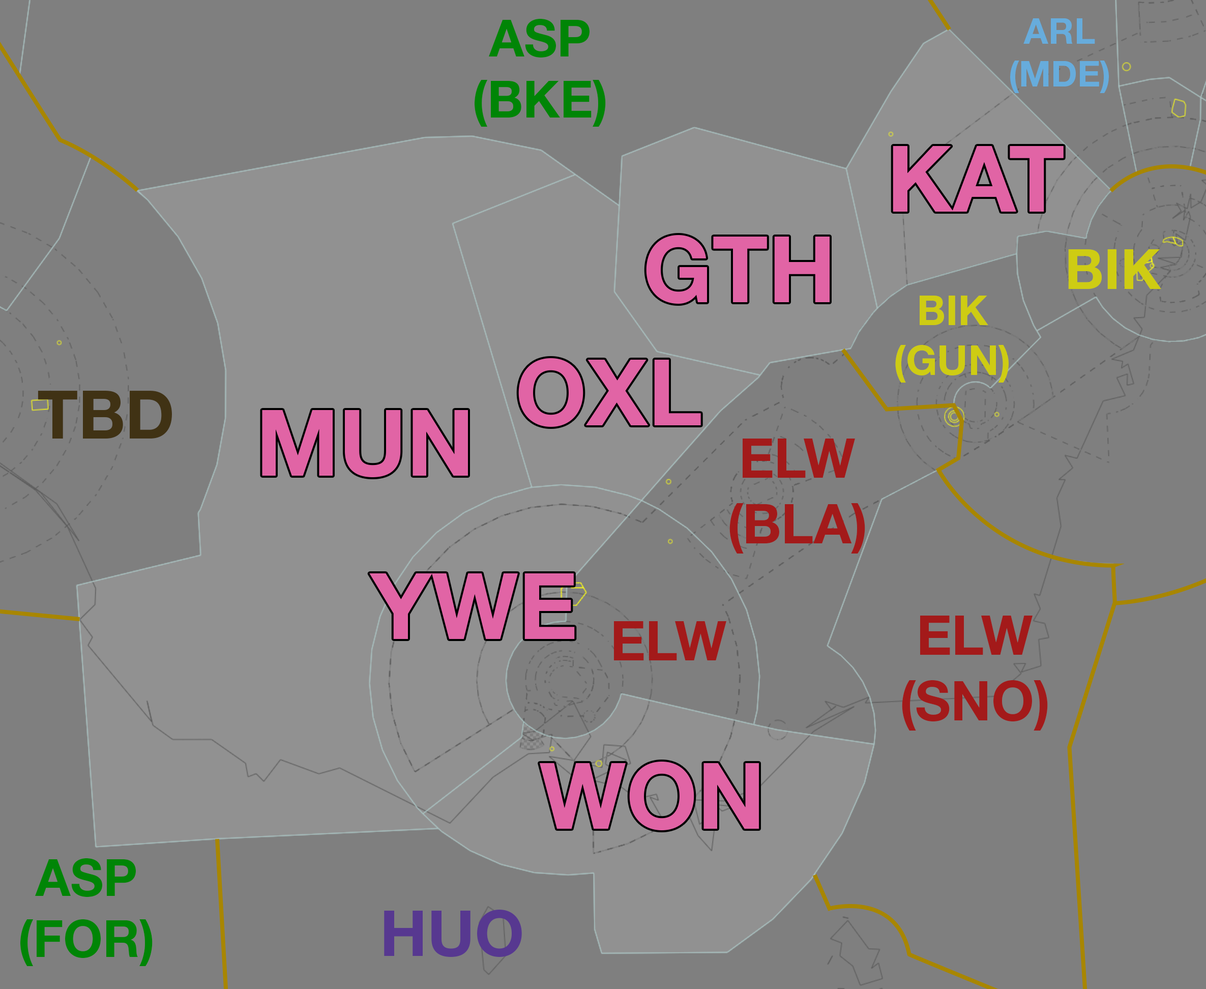
<style>
.page{position:relative;width:1206px;height:989px;background:#7f7f7f}
.page>*{position:absolute;margin:0}
.t1{font:51px "HelveticaNeueLTStd-Bd";color:#008506}
.t2{font:35.5px "HelveticaNeueLTStd-Bd";color:#67acdc}
.t3{font:91.6px "HelveticaNeueLTStd-Bd";color:#e164a5}
.t4{font:55.6px "HelveticaNeueLTStd-Bd";color:#cecc13}
.t5{font:41.5px "HelveticaNeueLTStd-Bd";color:#cecc13}
.t6{font:66.8px "HelveticaNeueLTStd-Bd";color:#403214}
.t7{font:54.7px "HelveticaNeueLTStd-Bd";color:#a31a1a}
.t8{font:63.7px "HelveticaNeueLTStd-Bd";color:#573890}
</style>
<div class="page">
<p class="t1" style="left:475px;top:19px;width:131px;height:108px;text-align:center">ASP<br>(BKE)</p>
<p class="t2" style="left:1010px;top:18px;width:99px;height:75px;text-align:center">ARL<br>(MDE)</p>
<p class="t3" style="left:893px;top:146px;width:171px;height:66px">KAT</p>
<p class="t3" style="left:646px;top:235px;width:184px;height:69px">GTH</p>
<p class="t4" style="left:1068px;top:249px;width:93px;height:40px">BIK</p>
<p class="t5" style="left:895px;top:296px;width:114px;height:86px;text-align:center">BIK<br>(GUN)</p>
<p class="t3" style="left:518px;top:358px;width:183px;height:69px">OXL</p>
<p class="t6" style="left:38px;top:391px;width:134px;height:47px">TBD</p>
<p class="t3" style="left:262px;top:410px;width:206px;height:67px">MUN</p>
<p class="t7" style="left:729px;top:438px;width:136px;height:115px;text-align:center">ELW<br>(BLA)</p>
<p class="t3" style="left:369px;top:573px;width:206px;height:66px">YWE</p>
<p class="t7" style="left:902px;top:615px;width:146px;height:115px;text-align:center">ELW<br>(SNO)</p>
<p class="t7" style="left:614px;top:621px;width:112px;height:40px">ELW</p>
<p class="t3" style="left:540px;top:761px;width:219px;height:69px">WON</p>
<p class="t1" style="left:20px;top:858px;width:133px;height:108px;text-align:center">ASP<br>(FOR)</p>
<p class="t8" style="left:384px;top:909px;width:138px;height:48px">HUO</p>
</div>
